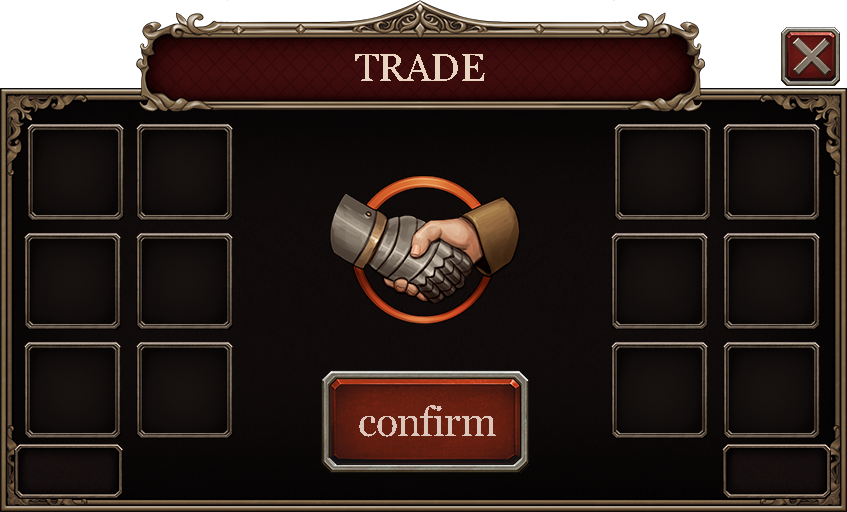
<style>
.page{position:relative;width:847px;height:512px}
.page>*{position:absolute;margin:0}
.t1{font:38.9px "Georgia";color:#e9d3c1}
.t2{font:40.7px "Georgia";color:#dcc6bb}
</style>
<div class="page">
<p class="t1" style="left:355px;top:54px;width:130px;height:27px">TRADE</p>
<p class="t2" style="left:359px;top:405px;width:137px;height:32px">confirm</p>
</div>
